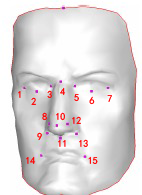
<style>
.page{position:relative;width:142px;height:195px}
.page>*{position:absolute;margin:0}
.t1{font:10px "SimHei";color:#ff0000}
.t2{font:10px "SimHei"}
</style>
<div class="page">
<p class="t1" style="left:60px;top:87px;width:6px;height:8px">4</p>
<p class="t1" style="left:18px;top:91px;width:3px;height:7px">1</p>
<p class="t1" style="left:31px;top:97px;width:5px;height:8px">2</p>
<p class="t1" style="left:47px;top:90px;width:5px;height:8px">3</p>
<p class="t1" style="left:74px;top:94px;width:5px;height:8px">5</p>
<p class="t1" style="left:89px;top:96px;width:6px;height:9px">6</p>
<p class="t2" style="left:107px;top:95px;width:5px;height:7px">7</p>
<p class="t1" style="left:42px;top:112px;width:5px;height:9px">8</p>
<p class="t2" style="left:56px;top:112px;width:9px;height:9px">10</p>
<p class="t1" style="left:72px;top:116px;width:9px;height:8px">12</p>
<p class="t2" style="left:37px;top:132px;width:5px;height:9px">9</p>
<p class="t1" style="left:58px;top:140px;width:8px;height:7px">11</p>
<p class="t1" style="left:79px;top:139px;width:9px;height:8px">13</p>
<p class="t1" style="left:26px;top:156px;width:10px;height:8px">14</p>
<p class="t2" style="left:88px;top:156px;width:10px;height:8px">15</p>
</div>
